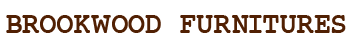
<style>
.page{position:relative;width:350px;height:50px;background:#ffffff}
.page>*{position:absolute;margin:0}
.t1{font:30px "JackInput";color:#512003}
</style>
<div class="page">
<p class="t1" style="left:6px;top:15px;width:340px;height:18px">BROOKWOOD FURNITURES</p>
</div>
